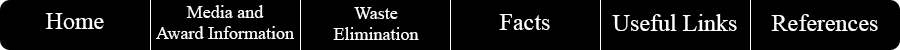
<style>
.page{position:relative;width:900px;height:50px;background:#000000}
.page>*{position:absolute;margin:0}
.t1{font:18px "TimesNewRomanPSMT";color:#ffffff}
.t2{font:24px "TimesNewRomanPSMT";color:#ffffff}
</style>
<div class="page">
<p class="t1" style="left:156px;top:5px;width:138px;height:34px;text-align:center">Media and <br>Award Information</p>
<p class="t2" style="left:45px;top:13px;width:59px;height:16px">Home</p>
<p class="t1" style="left:333px;top:7px;width:86px;height:33px;text-align:center">Waste <br>Elimination</p>
<p class="t2" style="left:499px;top:14px;width:51px;height:16px">Facts</p>
<p class="t2" style="left:612px;top:14px;width:125px;height:17px">Useful Links</p>
<p class="t2" style="left:771px;top:14px;width:107px;height:17px">References</p>
</div>
